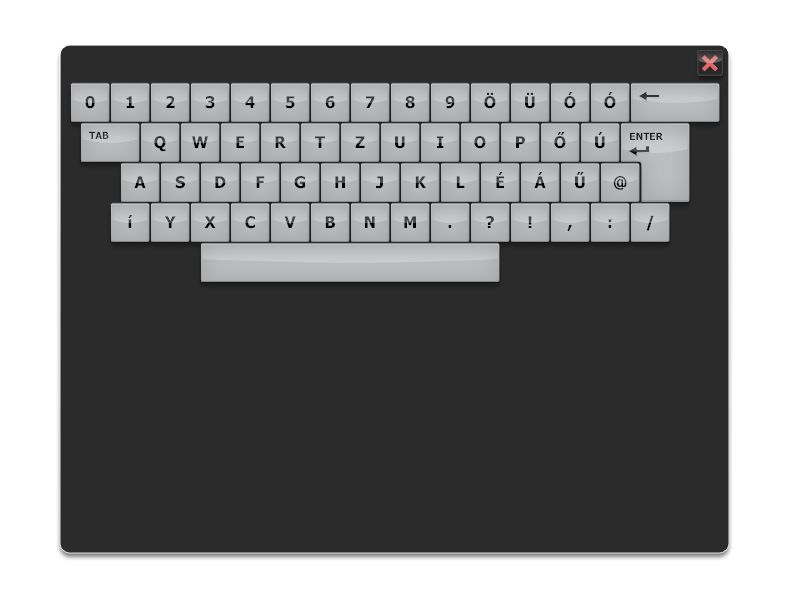
<style>
.page{position:relative;width:789px;height:598px;background:#2b2b2b}
.page>*{position:absolute;margin:0}
.t1{font:30px "Tahoma-Bold"}
.t2{font:15.9px "Tahoma-Bold"}
.t3{font:10px "Tahoma-Bold";color:#2d2d2d}
.t4{font:10px "Tahoma-Bold";color:#232323}
.t5{font:15.9px "Tahoma-Bold";color:#404040}
.t6{font:15.9px "Tahoma-Bold";color:#000000}
.t7{font:15.9px "Tahoma-Bold";color:#3b3b3b}
</style>
<div class="page">
<p class="t1" style="left:702px;top:55px;width:16px;height:17px;rotate:45deg">+</p>
<p class="t2" style="left:85px;top:96px;width:10px;height:13px">0</p>
<p class="t2" style="left:126px;top:96px;width:9px;height:12px">1</p>
<p class="t2" style="left:166px;top:96px;width:9px;height:12px">2</p>
<p class="t2" style="left:205px;top:96px;width:10px;height:13px">3</p>
<p class="t2" style="left:245px;top:96px;width:10px;height:12px">4</p>
<p class="t2" style="left:286px;top:96px;width:9px;height:13px">5</p>
<p class="t2" style="left:325px;top:96px;width:10px;height:13px">6</p>
<p class="t2" style="left:366px;top:96px;width:9px;height:12px">7</p>
<p class="t2" style="left:405px;top:96px;width:10px;height:13px">8</p>
<p class="t2" style="left:445px;top:96px;width:10px;height:13px">9</p>
<p class="t2" style="left:484px;top:92px;width:12px;height:17px">Ö</p>
<p class="t2" style="left:525px;top:92px;width:10px;height:17px">Ü</p>
<p class="t2" style="left:564px;top:92px;width:12px;height:17px">Ó</p>
<p class="t2" style="left:604px;top:92px;width:12px;height:17px">Ó</p>
<p class="t3" style="left:89px;top:131px;width:20px;height:8px">TAB</p>
<p class="t2" style="left:154px;top:136px;width:12px;height:16px">Q</p>
<p class="t2" style="left:192px;top:136px;width:16px;height:12px">W</p>
<p class="t2" style="left:236px;top:136px;width:8px;height:12px">E</p>
<p class="t2" style="left:275px;top:136px;width:11px;height:12px">R</p>
<p class="t2" style="left:315px;top:136px;width:10px;height:12px">T</p>
<p class="t2" style="left:355px;top:136px;width:10px;height:12px">Z</p>
<p class="t2" style="left:395px;top:136px;width:10px;height:13px">U</p>
<p class="t2" style="left:437px;top:136px;width:7px;height:12px">I</p>
<p class="t2" style="left:474px;top:136px;width:12px;height:13px">O</p>
<p class="t2" style="left:516px;top:136px;width:9px;height:12px">P</p>
<p class="t2" style="left:554px;top:132px;width:12px;height:17px">Ő</p>
<p class="t2" style="left:595px;top:132px;width:10px;height:17px">Ú</p>
<p class="t4" style="left:630px;top:132px;width:33px;height:8px">ENTER</p>
<p class="t2" style="left:496px;top:172px;width:8px;height:16px">É</p>
<p class="t2" style="left:534px;top:172px;width:12px;height:16px">Á</p>
<p class="t2" style="left:575px;top:172px;width:10px;height:17px">Ű</p>
<p class="t2" style="left:134px;top:176px;width:12px;height:12px">A</p>
<p class="t2" style="left:175px;top:176px;width:10px;height:13px">S</p>
<p class="t2" style="left:215px;top:176px;width:11px;height:12px">D</p>
<p class="t5" style="left:256px;top:176px;width:9px;height:12px">F</p>
<p class="t2" style="left:294px;top:176px;width:11px;height:13px">G</p>
<p class="t2" style="left:335px;top:176px;width:10px;height:12px">H</p>
<p class="t2" style="left:376px;top:176px;width:7px;height:13px">J</p>
<p class="t2" style="left:415px;top:176px;width:11px;height:12px">K</p>
<p class="t6" style="left:456px;top:176px;width:9px;height:12px">L</p>
<p class="t2" style="left:613px;top:176px;width:14px;height:14px">@</p>
<p class="t2" style="left:128px;top:215px;width:5px;height:13px">í</p>
<p class="t2" style="left:164px;top:216px;width:12px;height:12px">Y</p>
<p class="t2" style="left:204px;top:216px;width:12px;height:12px">X</p>
<p class="t2" style="left:245px;top:216px;width:10px;height:13px">C</p>
<p class="t2" style="left:284px;top:216px;width:12px;height:12px">V</p>
<p class="t2" style="left:325px;top:216px;width:10px;height:12px">B</p>
<p class="t2" style="left:365px;top:216px;width:10px;height:12px">N</p>
<p class="t2" style="left:404px;top:216px;width:12px;height:12px">M</p>
<p class="t7" style="left:486px;top:216px;width:8px;height:12px">?</p>
<p class="t2" style="left:528px;top:216px;width:4px;height:12px">!</p>
<p class="t6" style="left:608px;top:219px;width:4px;height:9px">:</p>
<p class="t2" style="left:646px;top:215px;width:8px;height:16px">/</p>
<p class="t6" style="left:448px;top:225px;width:4px;height:3px">.</p>
<p class="t6" style="left:567px;top:225px;width:5px;height:6px">,</p>
</div>
